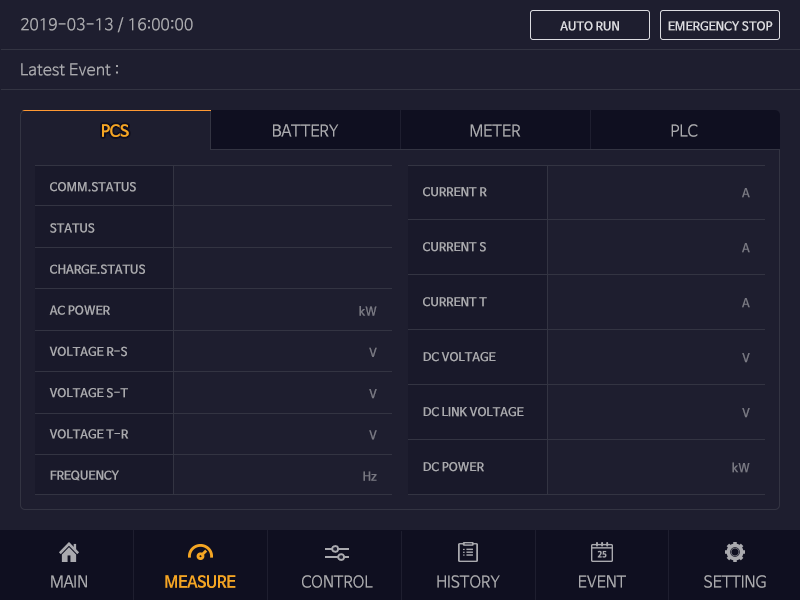
<style>
.page{position:relative;width:800px;height:600px;background:#1e1e2f}
.page>*{position:absolute;margin:0}
.t1{font:16px "NanumBarunGothic";color:#aaaaaf}
.t2{font:12px "NanumBarunGothicBold";color:#dcdce1}
.t3{font:16px "NanumBarunGothic";letter-spacing:-0.025em;color:#f5a623}
.t4{font:16px "NanumBarunGothicBold";letter-spacing:-0.025em;color:#f5a623}
.t5{font:16px "NanumBarunGothic";letter-spacing:-0.025em;color:#aaaaaf}
.t6{font:12px/41.2px "NanumBarunGothicBold";color:#aaaaaf}
.t7{font:12px/55px "NanumBarunGothicBold";color:#aaaaaf}
.t8{font:12px/55px "NanumBarunGothicBold";color:#787882}
.t9{font:12px/41.2px "NanumBarunGothicBold";color:#787882}
.t10{font:18px/41.2px "NanumBarunGothicBold";color:#dcdce1}
</style>
<div class="page">
<p class="t1" style="left:21px;top:17px;width:172px;height:16px">2019-03-13 / 16:00:00</p>
<p class="t2" style="left:560px;top:21px;width:59px;height:10px">AUTO RUN</p>
<p class="t2" style="left:668px;top:21px;width:105px;height:10px">EMERGENCY STOP</p>
<p class="t1" style="left:21px;top:63px;width:97px;height:13px">Latest Event :</p>
<p class="t3" style="left:102px;top:124px;width:27px;height:13px">PCS</p>
<p class="t4" style="left:102px;top:124px;width:27px;height:13px">PCS</p>
<p class="t5" style="left:273px;top:124px;width:66px;height:13px">BATTERY</p>
<p class="t5" style="left:470px;top:124px;width:51px;height:13px">METER</p>
<p class="t5" style="left:671px;top:124px;width:27px;height:13px">PLC</p>
<p class="t6" style="left:49px;top:182px;width:96px;height:299px">COMM.STATUS<br>STATUS<br>CHARGE.STATUS<br>AC POWER<br>VOLTAGE R-S<br>VOLTAGE S-T<br>VOLTAGE T-R<br>FREQUENCY</p>
<p class="t7" style="left:423px;top:187px;width:101px;height:285px">CURRENT R<br>CURRENT S<br>CURRENT T<br>DC VOLTAGE<br>DC LINK VOLTAGE<br>DC POWER</p>
<p class="t8" style="left:732px;top:188px;width:18px;height:285px;text-align:right">A<br> A<br> A<br> V<br> V<br> kW</p>
<p class="t9" style="left:359px;top:306px;width:18px;height:175px;text-align:right"><span class="t10"><br><br><br> </span>kW<br>V<br>V<br>V<br> Hz</p>
<p class="t5" style="left:51px;top:575px;width:36px;height:13px">MAIN</p>
<p class="t4" style="left:165px;top:575px;width:71px;height:13px">MEASURE</p>
<p class="t5" style="left:302px;top:575px;width:71px;height:13px">CONTROL</p>
<p class="t5" style="left:437px;top:575px;width:63px;height:13px">HISTORY</p>
<p class="t5" style="left:579px;top:575px;width:47px;height:13px">EVENT</p>
<p class="t5" style="left:704px;top:575px;width:62px;height:13px">SETTING</p>
</div>
